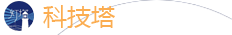
<style>
.page{position:relative;width:232px;height:35px;background:#ffffff}
.page>*{position:absolute;margin:0}
.t1{font:24px "MicrosoftYaHei";color:#fbad51}
</style>
<div class="page">
<p class="t1" style="left:43px;top:5px;width:72px;height:23px">科技塔</p>
</div>
